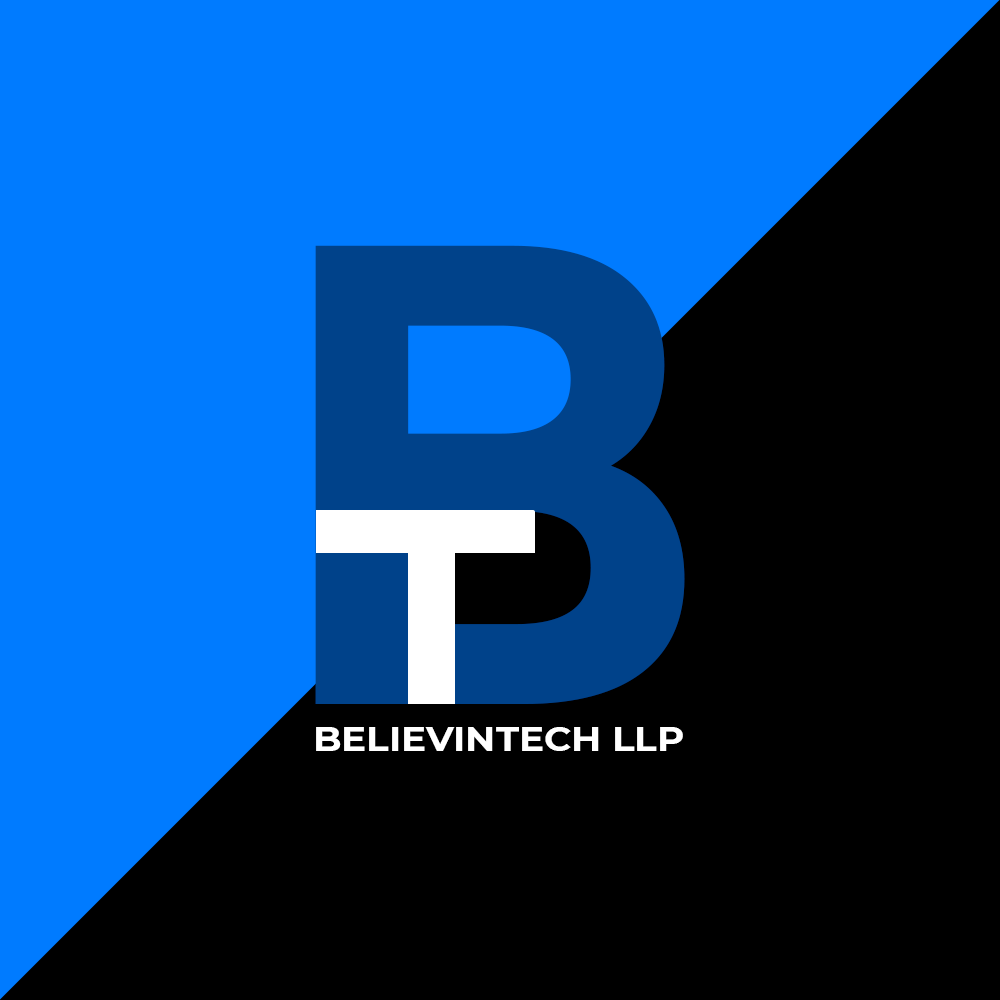
<style>
.page{position:relative;width:1000px;height:1000px;background:#000000}
.page>*{position:absolute;margin:0}
.t1{font:35.2px "Montserrat-Bold";color:#ffffff;scale:1.06 1}
</style>
<div class="page">
<p class="t1" style="left:316px;top:727px;width:367px;height:24px">BELIEVINTECH LLP</p>
</div>
